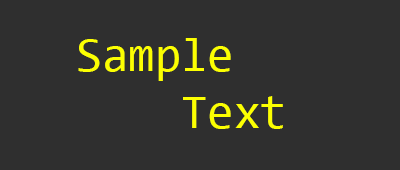
<style>
.page{position:relative;width:400px;height:170px;background:#2f2f2f}
.page>*{position:absolute;margin:0}
.t1{font:48px "Consolas";color:#fcff01}
</style>
<div class="page">
<p class="t1" style="left:78px;top:38px;width:205px;height:91px">Sample<br>    Text</p>
</div>
